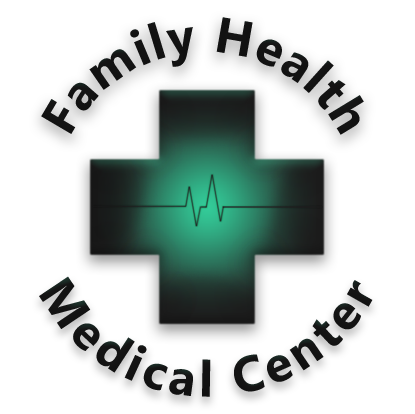
<style>
.page{position:relative;width:415px;height:414px;background:#ffffff}
.page>*{position:absolute;margin:0}
.t1{font:50px "Gadugi-Bold";letter-spacing:0.025em;color:#151515}
.t2{font:50px "Gadugi-Bold";letter-spacing:0.1em;color:#151515}
</style>
<div class="page">
<p class="t1" style="left:41px;top:17px;width:323px;height:118px;text-align:center">Family Health</p>
<p class="t2" style="left:39px;top:276px;width:334px;height:121px;text-align:center">Medical Center</p>
</div>
